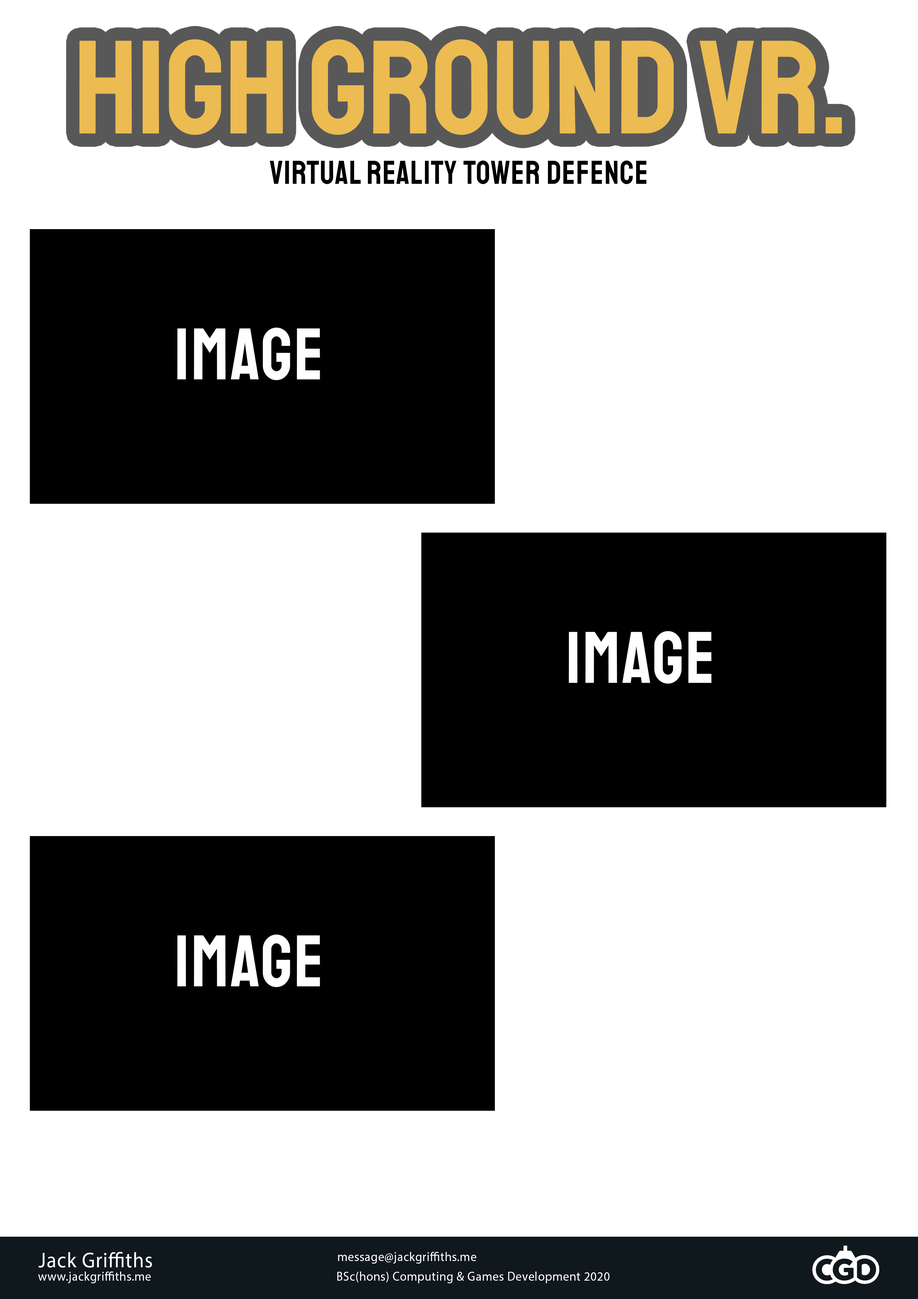
<style>
.page{position:relative;width:918px;height:1299px;background:#ffffff}
.page>*{position:absolute;margin:0}
.t1{font:32.7px "Staatliches-Regular";letter-spacing:0.03em;color:#000000;scale:0.95 1}
.t2{font:21.4px "MyriadPro-Regular";letter-spacing:0.03em;color:#ffffff;scale:0.95 1}
.t3{font:12.8px "MyriadPro-Regular";letter-spacing:0.03em;color:#ffffff;scale:0.95 1}
</style>
<div class="page">
<p class="t1" style="left:270px;top:160px;width:377px;height:24px">Virtual Reality Tower Defence</p>
<p class="t2" style="left:38px;top:1251px;width:114px;height:16px">Jack Griffiths</p>
<p class="t3" style="left:338px;top:1251px;width:138px;height:12px">message@jackgriffiths.me</p>
<p class="t3" style="left:38px;top:1271px;width:113px;height:12px">www.jackgriffiths.me</p>
<p class="t3" style="left:337px;top:1271px;width:273px;height:12px">BSc(hons) Computing &amp; Games Development 2020</p>
</div>
